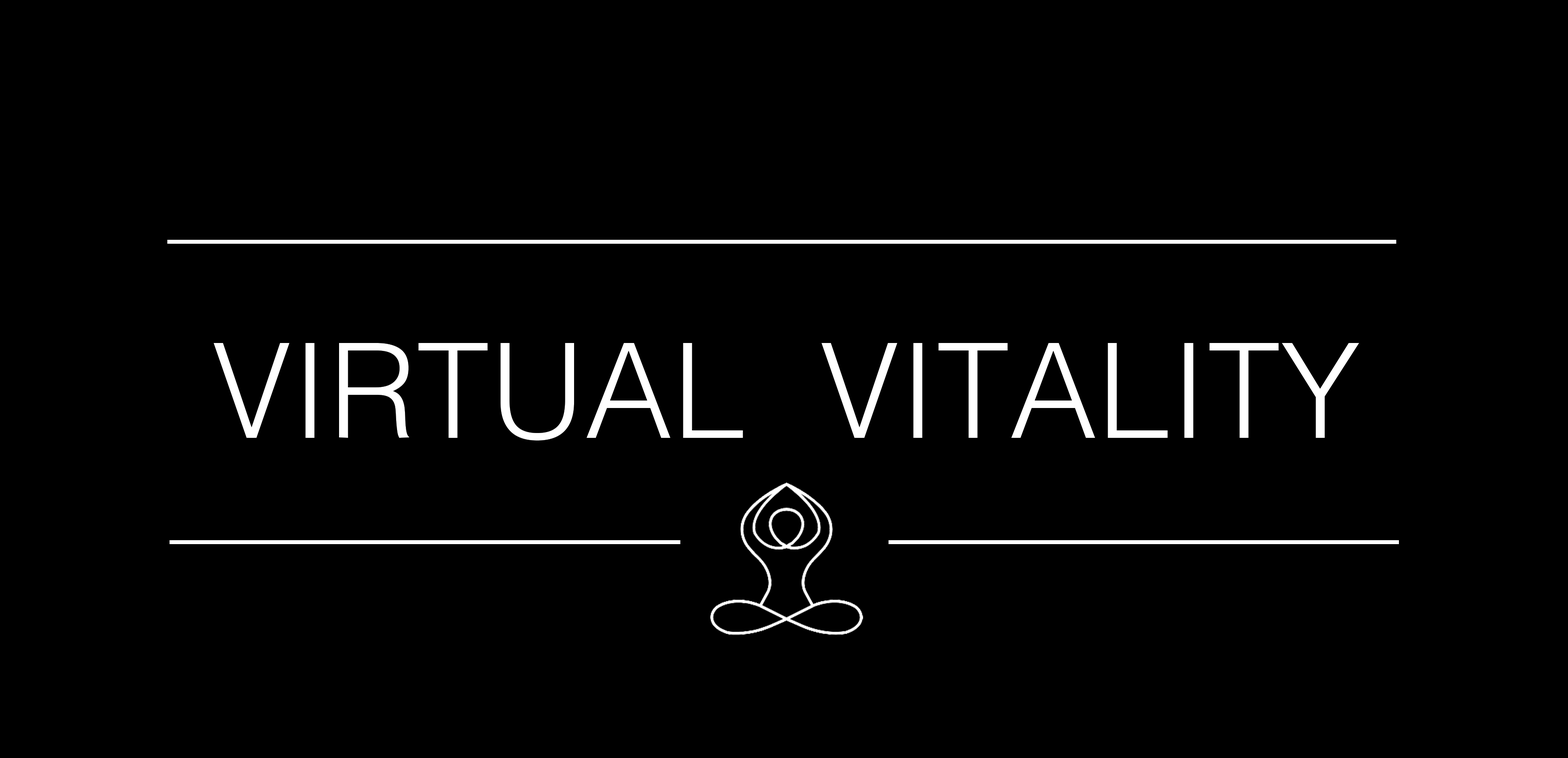
<style>
.page{position:relative;width:1568px;height:758px;background:#000000}
.page>*{position:absolute;margin:0}
.t1{font:131.8px "Helvetica-Light";color:#ffffff}
</style>
<div class="page">
<p class="t1" style="left:213px;top:343px;width:1146px;height:98px">VIRTUAL  VITALITY</p>
</div>
